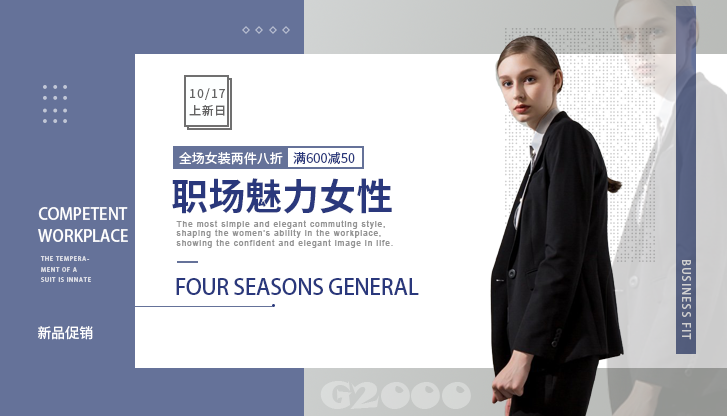
<style>
.page{position:relative;width:727px;height:416px;background:#ffffff}
.page>*{position:absolute;margin:0}
.t1{font:12px/16.7px "SourceHanSansCN-Regular";letter-spacing:0.1em;color:#646464;text-transform:uppercase}
.t2{font:12px/16.7px "SourceHanSansCN-Regular";letter-spacing:0.04em;color:#646464;text-transform:uppercase}
.t3{font:13px "SourceHanSansCN-Regular";color:#ffffff;text-transform:uppercase}
.t4{font:13px "SourceHanSansCN-Regular";color:#2a387c;text-transform:uppercase}
.t5{font:37px "SourceHanSansCN-Bold";color:#2a387c;text-transform:uppercase}
.t6{font:16px/22.6px "AdobeHeitiStd-Regular";color:#ffffff;text-transform:uppercase}
.t7{font:8px/9.6px "ArialMT";letter-spacing:0.1em;color:#949494;font-weight:bold}
.t8{font:6px/10.4px "AdobeHeitiStd-Regular";letter-spacing:0.12em;color:#d9dbe4;text-transform:uppercase}
.t9{font:11px/15.5px "AdobeHeitiStd-Regular";letter-spacing:0.12em;color:#cfcecf;text-transform:uppercase}
.t10{font:22px "AdobeHeitiStd-Regular";letter-spacing:-0.02em;color:#2a387c;text-transform:uppercase}
.t11{font:14px "SourceHanSansCN-Regular";color:#ffffff;text-transform:uppercase}
.t12{font:36.4px "SnapITC-Regular";color:#d7d9d8}
</style>
<div class="page">
<p class="t1" style="left:189px;top:88px;width:36px;height:28px">10/17<br><span class="t2">上新日</span></p>
<p class="t3" style="left:179px;top:151px;width:104px;height:14px">全场女装两件八折</p>
<p class="t4" style="left:293px;top:152px;width:62px;height:13px">满600减50</p>
<p class="t5" style="left:172px;top:178px;width:220px;height:36px">职场魅力女性</p>
<p class="t6" style="left:38px;top:207px;width:90px;height:35px">Competent<br>workplace</p>
<p class="t7" style="left:176px;top:220px;width:217px;height:28px">The most simple and elegant commuting style, shaping the women's ability in the workplace, showing the confident and elegant image in life.</p>
<p class="t8" style="left:40px;top:256px;width:51px;height:26px">The temperament of a suit is innate</p>
<p class="t9" style="left:682px;top:260px;width:9px;height:80px">Business fit</p>
<p class="t10" style="left:176px;top:278px;width:243px;height:17px">Four Seasons General</p>
<p class="t11" style="left:38px;top:326px;width:55px;height:14px">新品促销</p>
<p class="t12" style="left:320px;top:381px;width:151px;height:28px">G2000</p>
</div>
